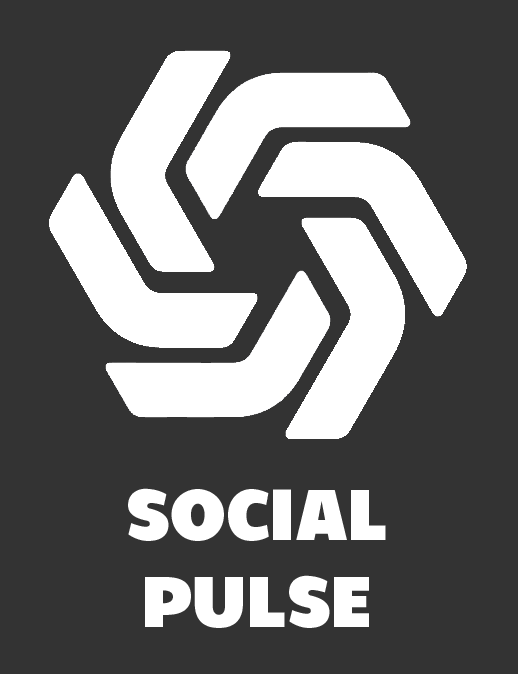
<style>
.page{position:relative;width:518px;height:674px;background:#333333}
.page>*{position:absolute;margin:0}
.t1{font:72px "Walrus-Bold";color:#ffffff}
</style>
<div class="page">
<p class="t1" style="left:128px;top:488px;width:258px;height:140px;text-align:center">SOCIAL PULSE</p>
</div>
